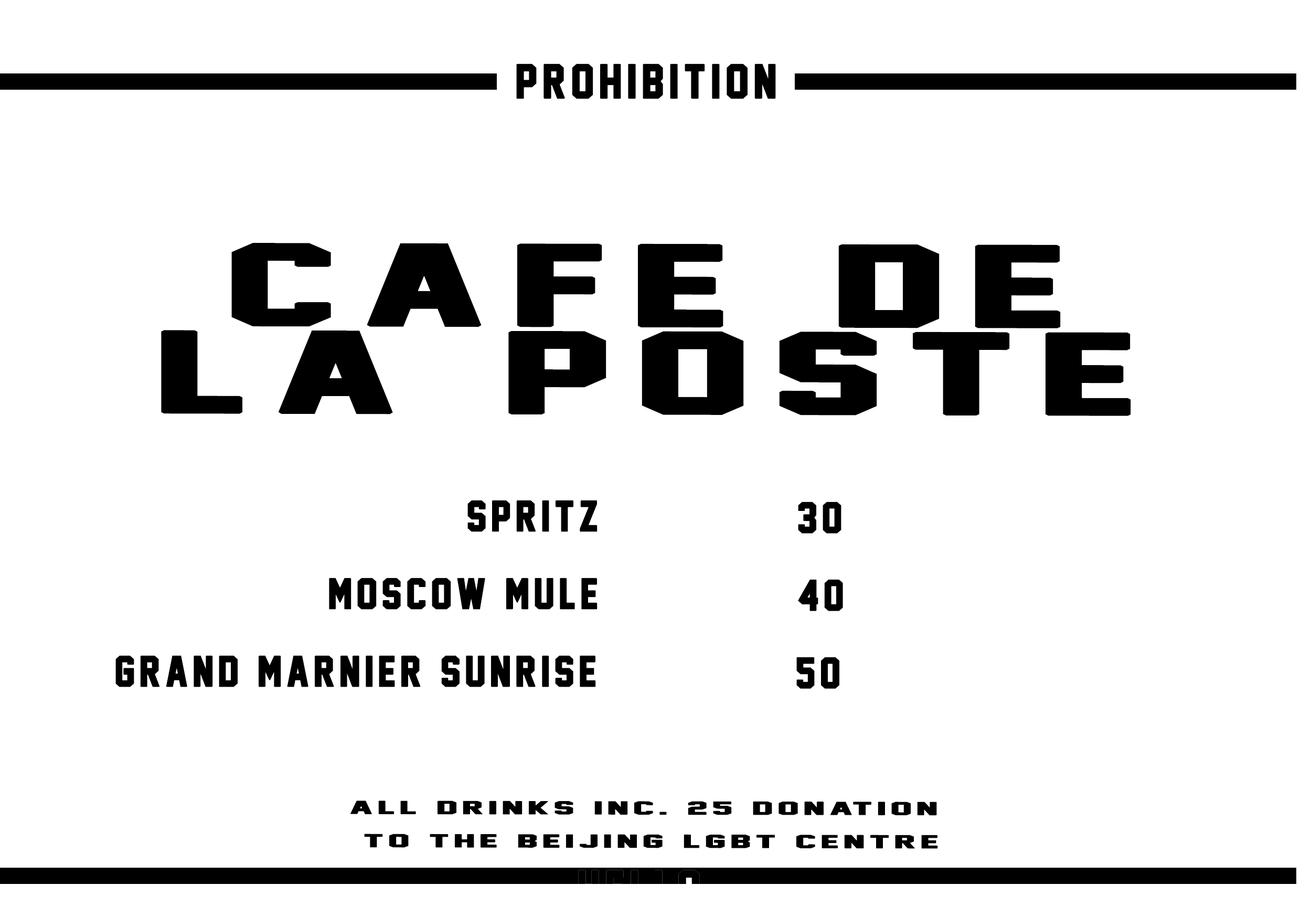
<style>
.page{position:relative;width:1301px;height:917px;background:#ffffff}
.page>*{position:absolute;margin:0}
.t1{font:43.7px "JerseyM54";letter-spacing:0.1em;color:#000000;font-weight:bold}
.t2{font:104.9px/87.4px "JerseyM54";letter-spacing:0.1em;color:#000000;font-weight:bold;scale:2.04 1}
.t3{font:39.3px "JerseyM54";letter-spacing:0.1em;color:#000000;font-weight:bold}
.t4{font:39.6px "JerseyM54";letter-spacing:0.1em;color:#000000;font-weight:bold}
.t5{font:16.8px/33.2px "JerseyM54";letter-spacing:0.1em;color:#000000;font-weight:bold;scale:2.4 1}
</style>
<div class="page">
<p class="t1" style="left:516px;top:63px;width:260px;height:36px">prohibition</p>
<p class="t2" style="left:161px;top:243px;width:970px;height:173px;text-align:center">cafe de<br>la poste</p>
<p class="t3" style="left:467px;top:500px;width:130px;height:32px">spritz</p>
<p class="t4" style="left:798px;top:501px;width:43px;height:32px">30</p>
<p class="t3" style="left:329px;top:577px;width:268px;height:32px">moscow mule</p>
<p class="t4" style="left:798px;top:579px;width:45px;height:32px">40</p>
<p class="t3" style="left:115px;top:655px;width:481px;height:32px">grand marnier sunrise</p>
<p class="t4" style="left:796px;top:657px;width:43px;height:32px">50</p>
<p class="t5" style="left:350px;top:800px;width:588px;height:49px;text-align:center">all drinks inc. 25 donation<br> to the beijing lgbt centre</p>
</div>
